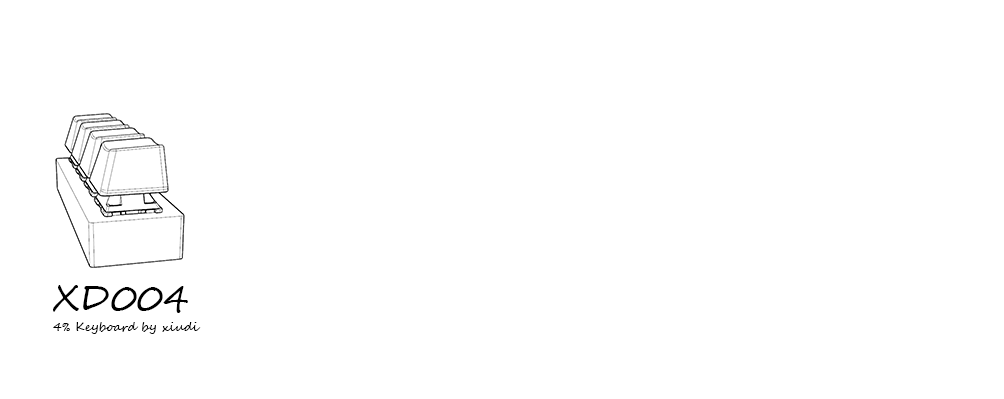
<style>
.page{position:relative;width:1004px;height:399px;background:#ffffff}
.page>*{position:absolute;margin:0}
.t1{font:36px "SegoeScript";color:#000000}
.t2{font:12px "SegoeScript";color:#000000}
</style>
<div class="page">
<p class="t1" style="left:53px;top:285px;width:135px;height:28px">XD004</p>
<p class="t2" style="left:53px;top:322px;width:148px;height:12px">4% Keyboard by xiudi</p>
</div>
